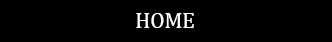
<style>
.page{position:relative;width:332px;height:42px;background:#000000}
.page>*{position:absolute;margin:0}
.t1{font:21.7px "Cambria";color:#ffffff}
</style>
<div class="page">
<p class="t1" style="left:136px;top:13px;width:58px;height:15px">HOME</p>
</div>
